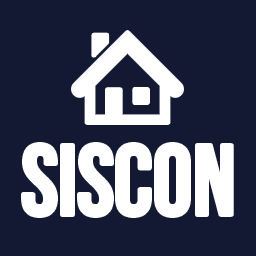
<style>
.page{position:relative;width:256px;height:256px;background:#131833}
.page>*{position:absolute;margin:0}
.t1{font:100px "BebasNeue";color:#ffffff}
</style>
<div class="page">
<p class="t1" style="left:23px;top:144px;width:209px;height:72px">Siscon</p>
</div>
